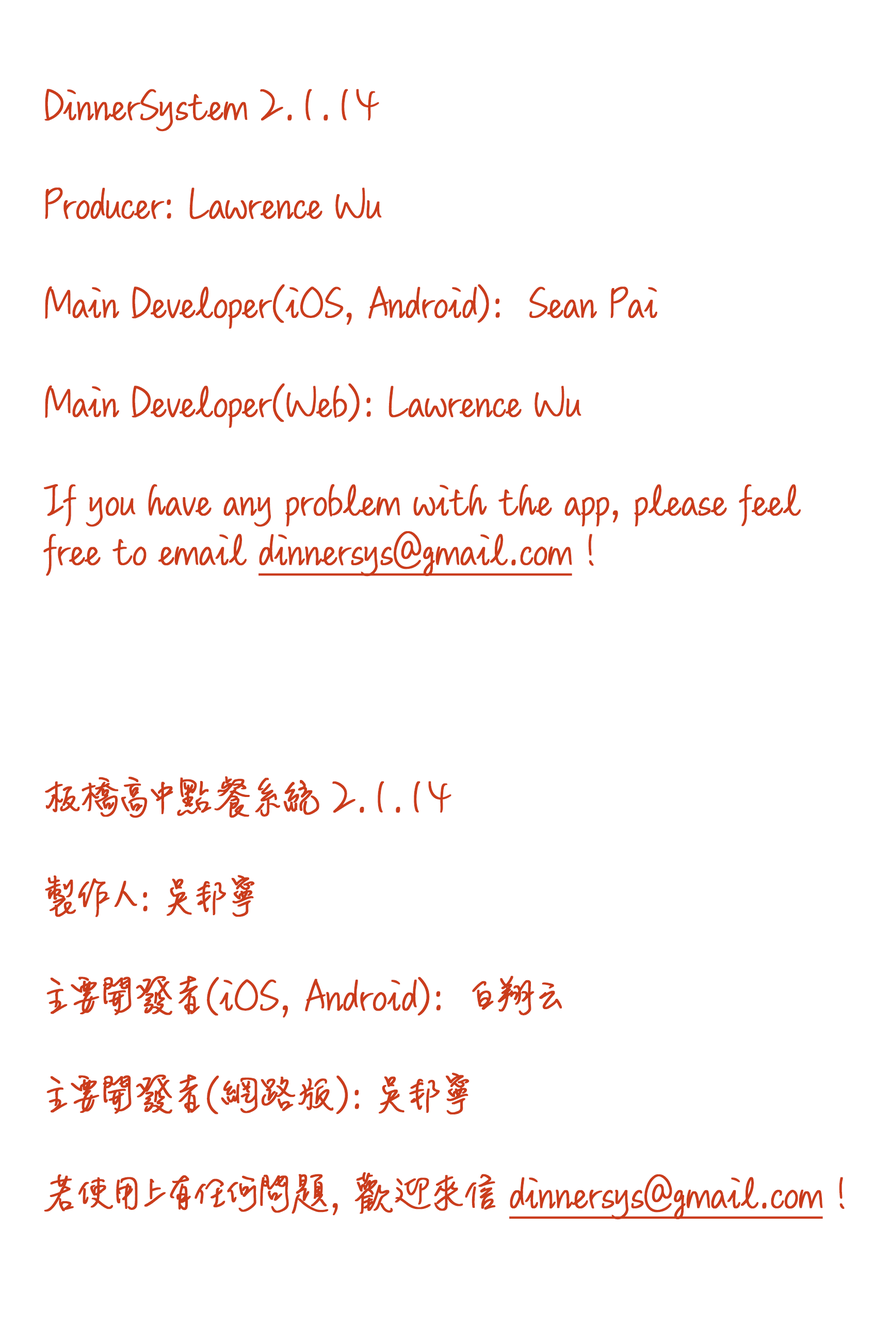
<style>
.page{position:relative;width:890px;height:1340px;background:#ffffff}
.page>*{position:absolute;margin:0}
.t1{font:46px/49.5px "MLingWaiMedium-TC";letter-spacing:-0.014em;color:#ca3c1b;font-weight:bold;scale:0.92 1}
.t2{font:46px/49.5px "MLingWaiMedium-TC";letter-spacing:-0.014em;color:#ca3c1b;font-weight:bold;text-decoration:underline;scale:0.92 1}
.t3{font:46px/49.5px "MLingWaiMedium-TC";letter-spacing:-0.01em;color:#ca3c1b;font-weight:bold;scale:0.93 1}
</style>
<div class="page">
<p class="t1" style="left:43px;top:89px;width:802px;height:1130px">DinnerSystem 2.1.14<br><br>Producer: Lawrence Wu<br><br>Main Developer(iOS, Android):  Sean Pai<br><br>Main Developer(Web): Lawrence Wu<br><br>If you have any problem with the app, please feel <br>free to email <span class="t2">dinnersys@gmail.com </span>!<br><br><br><br><br>板橋高中點餐系統 2.1.14<br><br>製作人: 吳邦寧<br><br><span class="t3">主要開發者(iOS, Android):  白翔云<br><br>主要開發者(網路版): 吳邦寧<br><br></span>若使用上有任何問題, 歡迎來信 <span class="t2">dinnersys@gmail.com</span> !</p>
</div>
